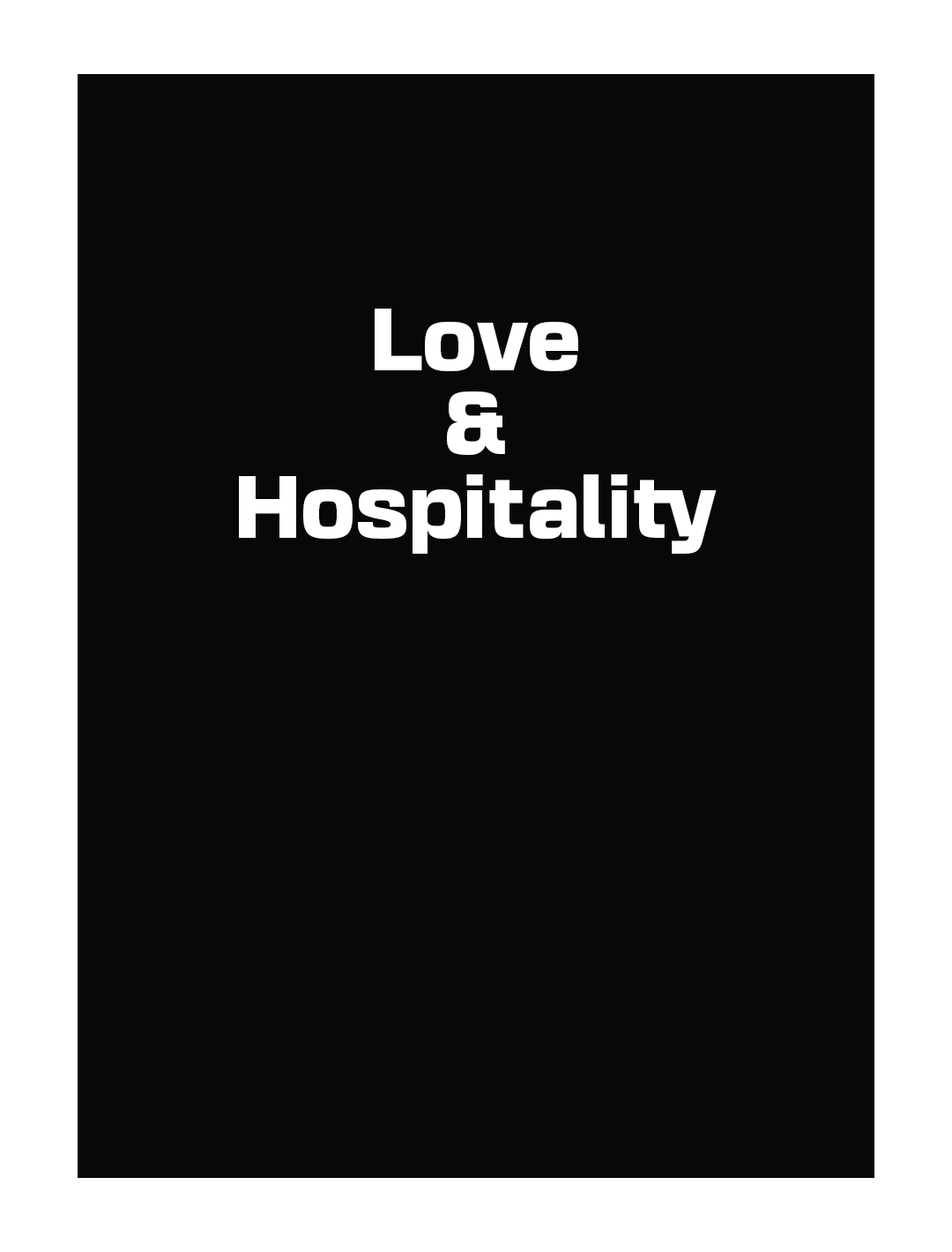
<style>
.page{position:relative;width:952px;height:1252px;background:#080808}
.page>*{position:absolute;margin:0}
.t1{font:79.4px/83.8px "BasementGrotesque-Black";color:#ffffff}
</style>
<div class="page">
<p class="t1" style="left:239px;top:309px;width:478px;height:245px;text-align:center">Love<br>&amp;<br>Hospitality</p>
</div>
